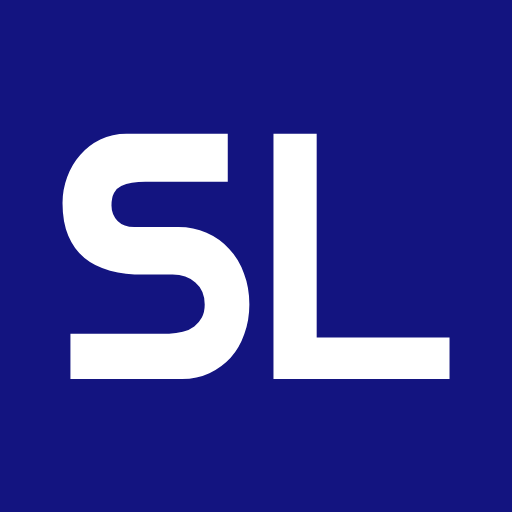
<style>
.page{position:relative;width:512px;height:512px;background:#131480}
.page>*{position:absolute;margin:0}
.t1{font:360px "DoHyeon-Regular";color:#ffffff}
</style>
<div class="page">
<p class="t1" style="left:62px;top:133px;width:388px;height:246px">SL</p>
</div>
